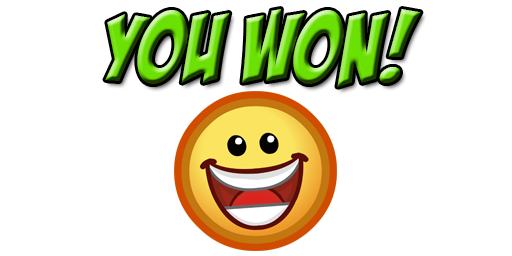
<style>
.page{position:relative;width:512px;height:256px;background:#ffffff}
.page>*{position:absolute;margin:0}
.t1{font:94.8px "BadaBoomBB";letter-spacing:0.003em}
</style>
<div class="page">
<p class="t1" style="left:105px;top:9px;width:316px;height:78px">YOU WON!</p>
</div>
